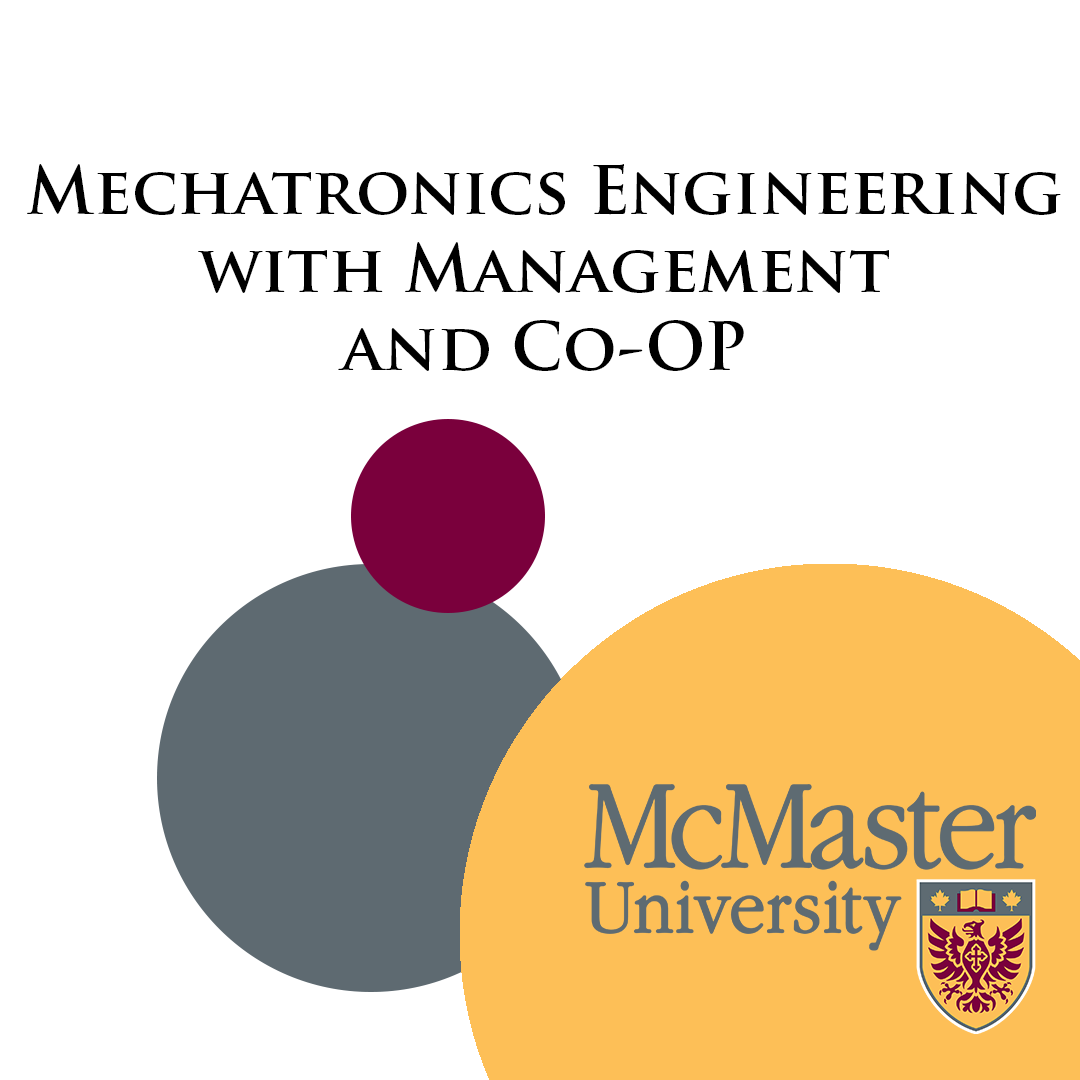
<style>
.page{position:relative;width:1080px;height:1080px;background:#ffffff}
.page>*{position:absolute;margin:0}
.t1{font:65px "TrajanPro-Bold";color:#000000}
</style>
<div class="page">
<p class="t1" style="left:27px;top:164px;width:1034px;height:207px;text-align:center">Mechatronics Engineering<br>with Management<br>and Co-OP</p>
</div>
